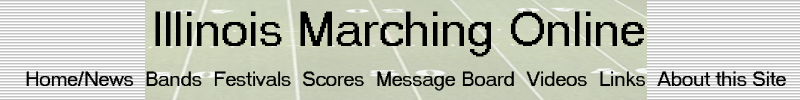
<style>
.page{position:relative;width:800px;height:100px}
.page>*{position:absolute;margin:0}
.t1{font:48px "MS Sans Serif";color:#000000}
.t2{font:20px "MS Sans Serif";color:#000000}
</style>
<div class="page">
<p class="t1" style="left:155px;top:11px;width:489px;height:46px">Illinois Marching Online</p>
<p class="t2" style="left:26px;top:71px;width:760px;height:20px">Home/News  Bands  Festivals  Scores  Message Board  Videos  Links  About this Site</p>
</div>
